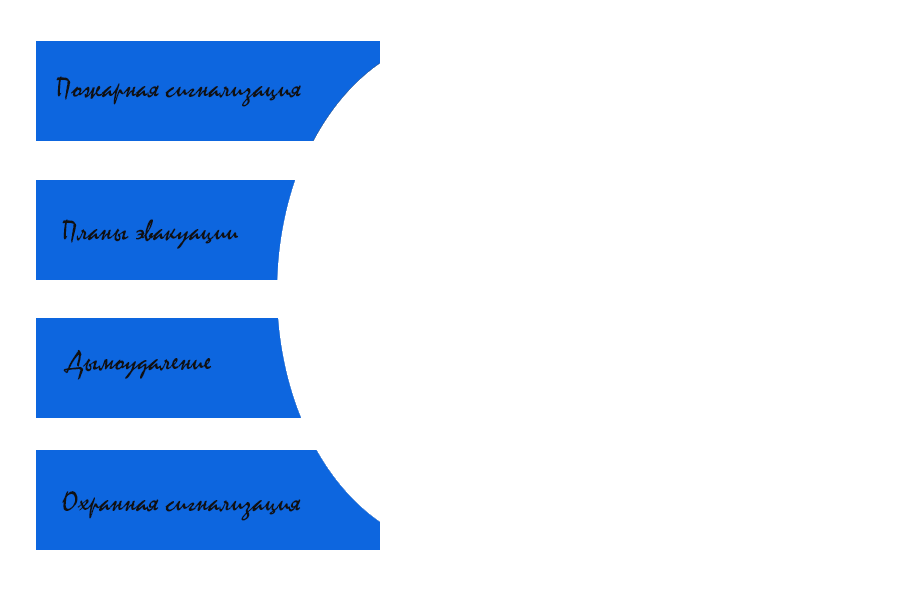
<style>
.page{position:relative;width:900px;height:600px;background:#ffffff}
.page>*{position:absolute;margin:0}
.t1{font:30px "Mistral";color:#101112}
</style>
<div class="page">
<p class="t1" style="left:56px;top:76px;width:245px;height:31px">Пожарная сигнализация</p>
<p class="t1" style="left:62px;top:219px;width:177px;height:30px">Планы эвакуации</p>
<p class="t1" style="left:63px;top:349px;width:149px;height:31px">Дымоудаление</p>
<p class="t1" style="left:62px;top:491px;width:239px;height:30px">Охранная сигнализация</p>
</div>
